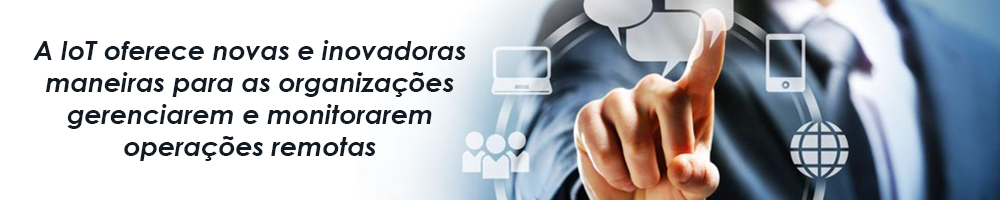
<style>
.page{position:relative;width:1000px;height:200px;background:#ffffff}
.page>*{position:absolute;margin:0}
.t1{font:26.7px "CenturyGothic-BoldItalic";color:#121b24}
</style>
<div class="page">
<p class="t1" style="left:33px;top:40px;width:433px;height:121px;text-align:center">A IoT oferece novas e inovadoras maneiras para as organizações gerenciarem e monitorarem operações remotas</p>
</div>
